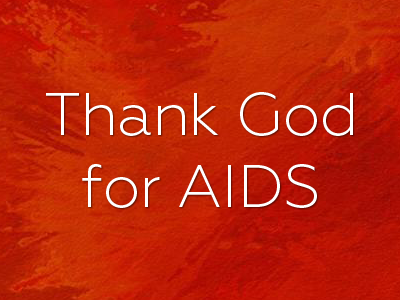
<style>
.page{position:relative;width:400px;height:300px}
.page>*{position:absolute;margin:0}
.t1{font:60px "Geometria-Light";color:#ffffff}
</style>
<div class="page">
<p class="t1" style="left:46px;top:92px;width:307px;height:116px;text-align:center">Thank God<br>for AIDS</p>
</div>
